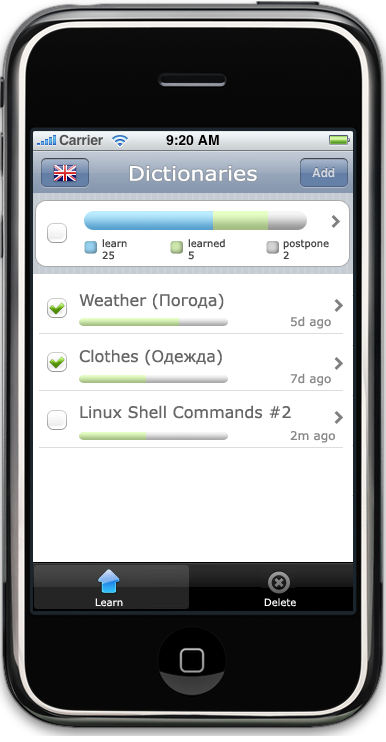
<style>
.page{position:relative;width:386px;height:742px;background:#ffffff}
.page>*{position:absolute;margin:0}
.t1{font:19.9px "Verdana";color:#ffffff;scale:1.11 1}
.t2{font:10px "Verdana";color:#444444}
.t3{font:16px "Verdana";color:#666666}
.t4{font:12px "Verdana";color:#888888}
.t5{font:10px "Verdana";color:#ffffff}
</style>
<div class="page">
<p class="t1" style="left:130px;top:166px;width:127px;height:15px">Dictionaries</p>
<p class="t2" style="left:102px;top:239px;width:25px;height:21px">learn<br>25</p>
<p class="t2" style="left:188px;top:239px;width:37px;height:21px">learned<br>5</p>
<p class="t2" style="left:283px;top:239px;width:46px;height:20px">postpone<br>2</p>
<p class="t3" style="left:79px;top:293px;width:145px;height:17px">Weather (Погода)</p>
<p class="t4" style="left:291px;top:316px;width:40px;height:13px">5d ago</p>
<p class="t3" style="left:79px;top:349px;width:143px;height:17px">Clothes (Одежда)</p>
<p class="t4" style="left:290px;top:373px;width:41px;height:13px">7d ago</p>
<p class="t3" style="left:80px;top:405px;width:211px;height:14px">Linux Shell Commands #2</p>
<p class="t4" style="left:290px;top:431px;width:45px;height:12px">2m ago</p>
<p class="t5" style="left:95px;top:598px;width:28px;height:9px">Learn</p>
<p class="t5" style="left:264px;top:598px;width:32px;height:9px">Delete</p>
</div>
